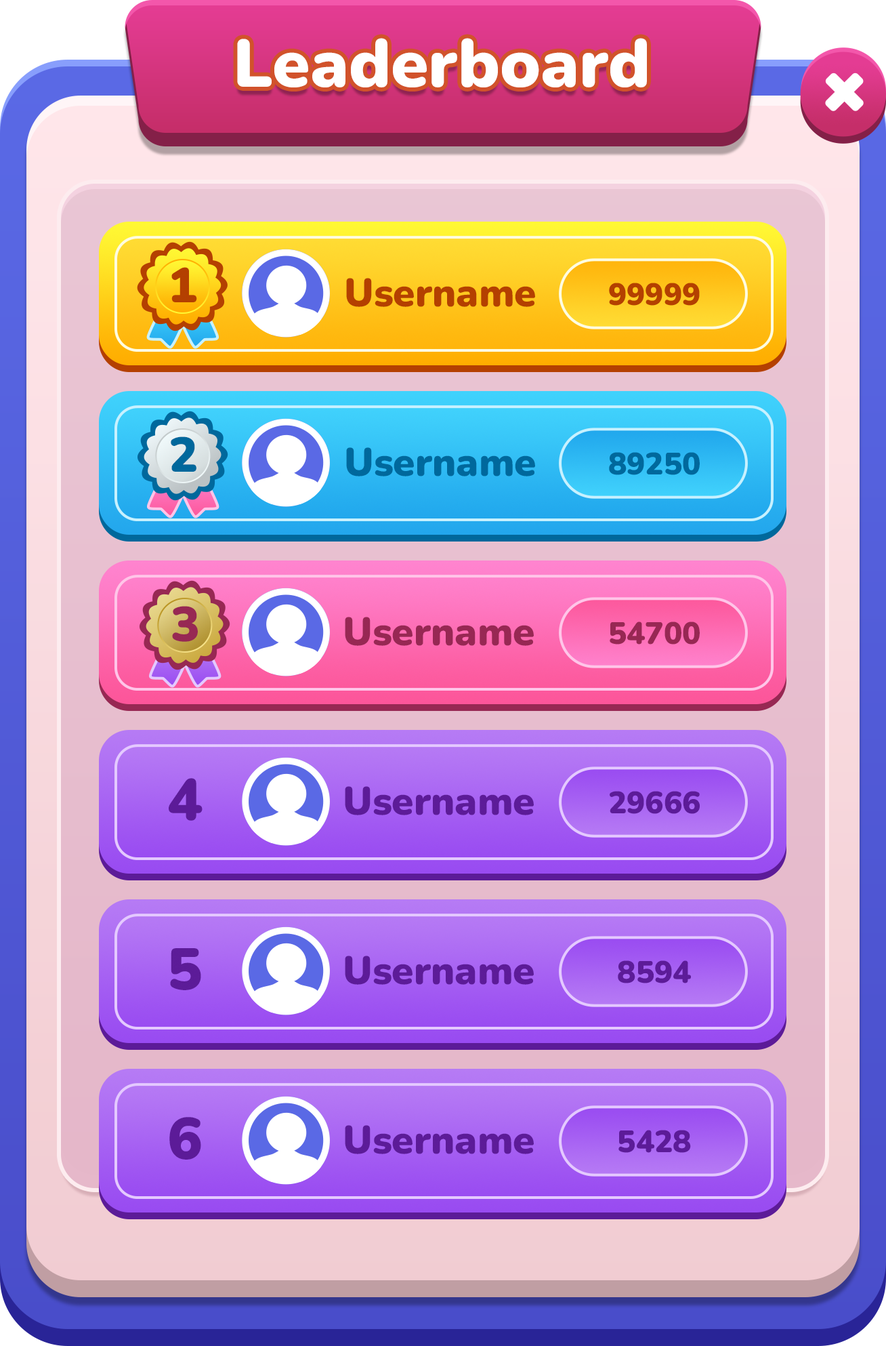
<style>
.page{position:relative;width:886px;height:1346px}
.page>*{position:absolute;margin:0}
.t1{font:67.8px "Nunito-Black";color:#ffffff}
.t2{font:48.8px "Nunito-Black";color:#b44001}
.t3{font:39.5px "Nunito-Black";color:#b44001}
.t4{font:30.9px "Nunito-Black";color:#b44001}
.t5{font:48.8px "Nunito-Black";color:#00689c}
.t6{font:39.5px "Nunito-Black";color:#00689c}
.t7{font:30.9px "Nunito-Black";color:#00689c}
.t8{font:48.8px "Nunito-Black";color:#972853}
.t9{font:39.5px "Nunito-Black";color:#972853}
.t10{font:30.9px "Nunito-Black";color:#972853}
.t11{font:58.5px "Nunito-Black";color:#5c1b98}
.t12{font:39.5px "Nunito-Black";color:#5c1b98}
.t13{font:30.9px "Nunito-Black";color:#5c1b98}
</style>
<div class="page">
<p class="t1" style="left:237px;top:38px;width:410px;height:49px">Leaderboard</p>
<p class="t2" style="left:171px;top:267px;width:26px;height:35px">1</p>
<p class="t3" style="left:346px;top:278px;width:189px;height:29px">Username</p>
<p class="t4" style="left:609px;top:283px;width:91px;height:23px">99999</p>
<p class="t5" style="left:171px;top:436px;width:25px;height:36px">2</p>
<p class="t6" style="left:346px;top:447px;width:189px;height:29px">Username</p>
<p class="t7" style="left:609px;top:452px;width:91px;height:23px">89250</p>
<p class="t8" style="left:172px;top:606px;width:26px;height:36px">3</p>
<p class="t9" style="left:345px;top:617px;width:189px;height:29px">Username</p>
<p class="t10" style="left:610px;top:621px;width:90px;height:23px">54700</p>
<p class="t11" style="left:169px;top:778px;width:34px;height:42px">4</p>
<p class="t12" style="left:345px;top:786px;width:189px;height:29px">Username</p>
<p class="t13" style="left:610px;top:791px;width:90px;height:23px">29666</p>
<p class="t11" style="left:170px;top:948px;width:31px;height:42px">5</p>
<p class="t12" style="left:345px;top:955px;width:189px;height:29px">Username</p>
<p class="t13" style="left:618px;top:960px;width:73px;height:23px">8594</p>
<p class="t11" style="left:169px;top:1117px;width:32px;height:42px">6</p>
<p class="t12" style="left:345px;top:1125px;width:189px;height:29px">Username</p>
<p class="t13" style="left:619px;top:1129px;width:72px;height:23px">5428</p>
</div>
